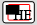
<style>
.page{position:relative;width:37px;height:25px}
.page>*{position:absolute;margin:0}
.t1{font:14px "TimesNewRomanPSMT";color:#000000}
</style>
<div class="page">
<p class="t1" style="left:13px;top:10px;width:19px;height:10px">HE</p>
</div>
